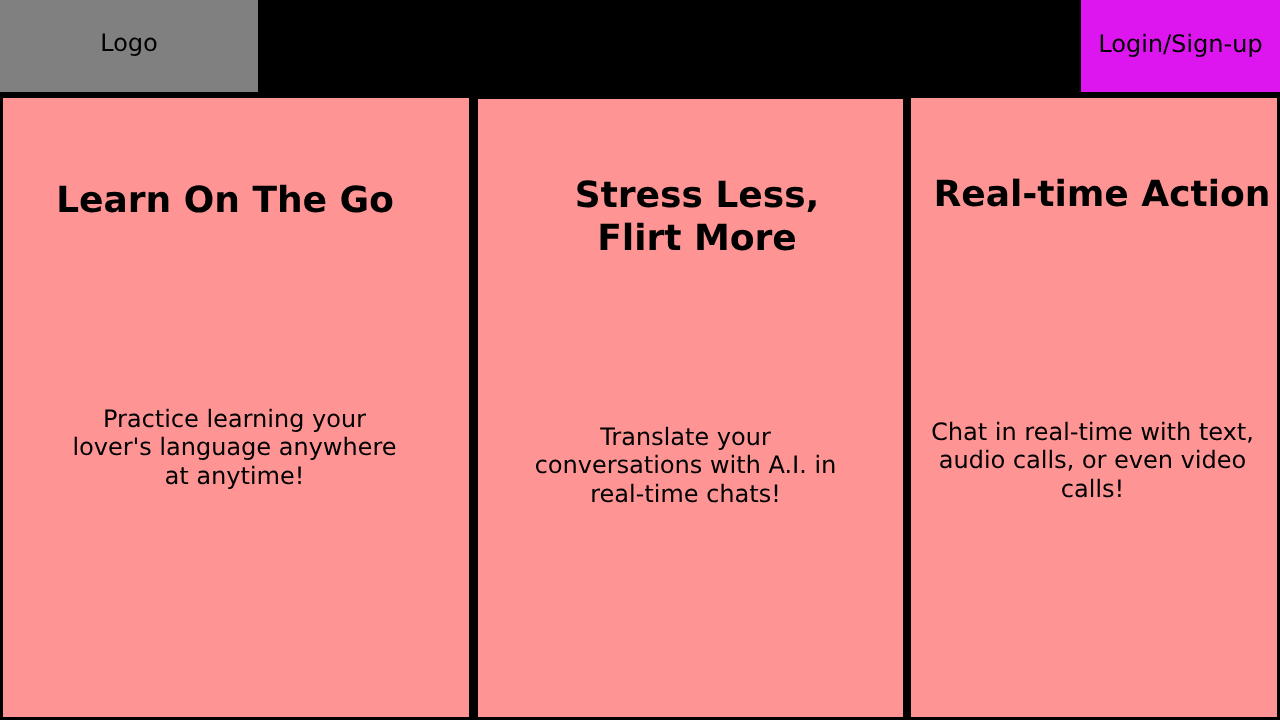
<style>
.page{position:relative;width:1280px;height:720px;background:#ff9494}
.page>*{position:absolute;margin:0}
.t1{font:24px "DejaVuSans";color:#000000}
.t2{font:36px "DejaVuSans-Bold";color:#000000}
</style>
<div class="page">
<p class="t1" style="left:102px;top:33px;width:55px;height:23px">Logo</p>
<p class="t1" style="left:1100px;top:33px;width:162px;height:24px">Login/Sign-up</p>
<p class="t2" style="left:59px;top:184px;width:334px;height:29px">Learn On The Go</p>
<p class="t2" style="left:577px;top:180px;width:239px;height:71px;text-align:center">Stress Less,<br>Flirt More</p>
<p class="t2" style="left:936px;top:178px;width:332px;height:29px">Real-time Action</p>
<p class="t1" style="left:74px;top:408px;width:322px;height:81px;text-align:center">Practice learning your lover's language anywhere at anytime!</p>
<p class="t1" style="left:932px;top:421px;width:320px;height:77px;text-align:center">Chat in real-time with text, audio calls, or even video calls!</p>
<p class="t1" style="left:536px;top:426px;width:299px;height:77px;text-align:center">Translate your conversations with A.I. in real-time chats!</p>
</div>
